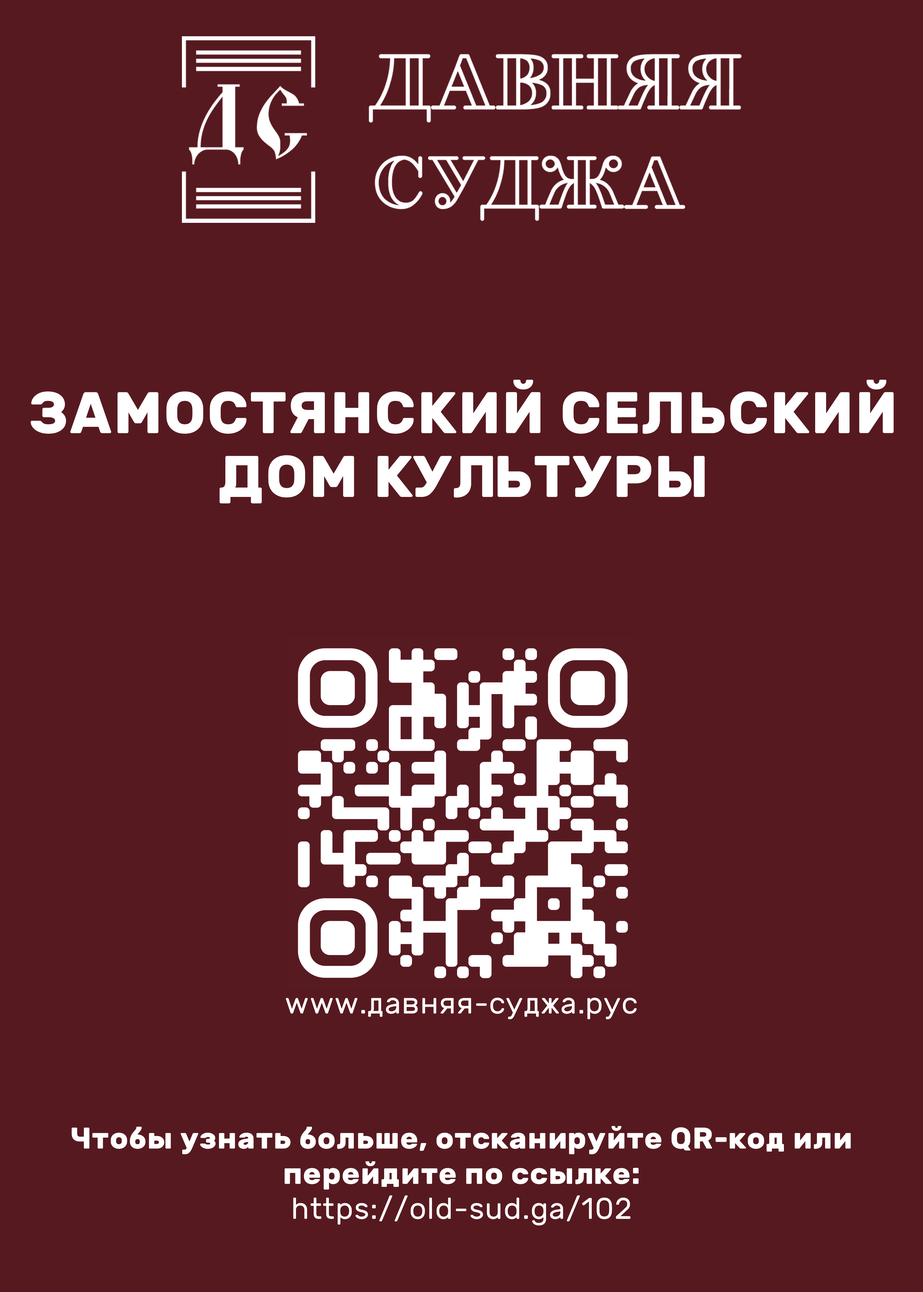
<style>
.page{position:relative;width:923px;height:1292px;background:#571920}
.page>*{position:absolute;margin:0}
.t1{font:58.6px/63.8px "Rubik-Bold";letter-spacing:0.025em;color:#ffffff;text-transform:uppercase}
.t2{font:30px "Rubik-Regular";letter-spacing:0.025em;color:#ffffff}
.t3{font:30px/35.2px "Rubik-Bold";letter-spacing:0.025em;color:#ffffff}
.t4{font:30px/35.2px "Rubik-Regular";letter-spacing:0.025em;color:#ffffff}
</style>
<div class="page">
<p class="t1" style="left:31px;top:380px;width:863px;height:123px;text-align:center">замостянский сельский дом культуры</p>
<p class="t2" style="left:286px;top:998px;width:351px;height:21px">www.давняя-суджа.рус</p>
<p class="t3" style="left:72px;top:1126px;width:779px;height:99px;text-align:center">Чтобы узнать больше, отсканируйте QR-код или перейдите по ссылке:<br><span class="t4">https://old-sud.ga/102</span></p>
</div>
